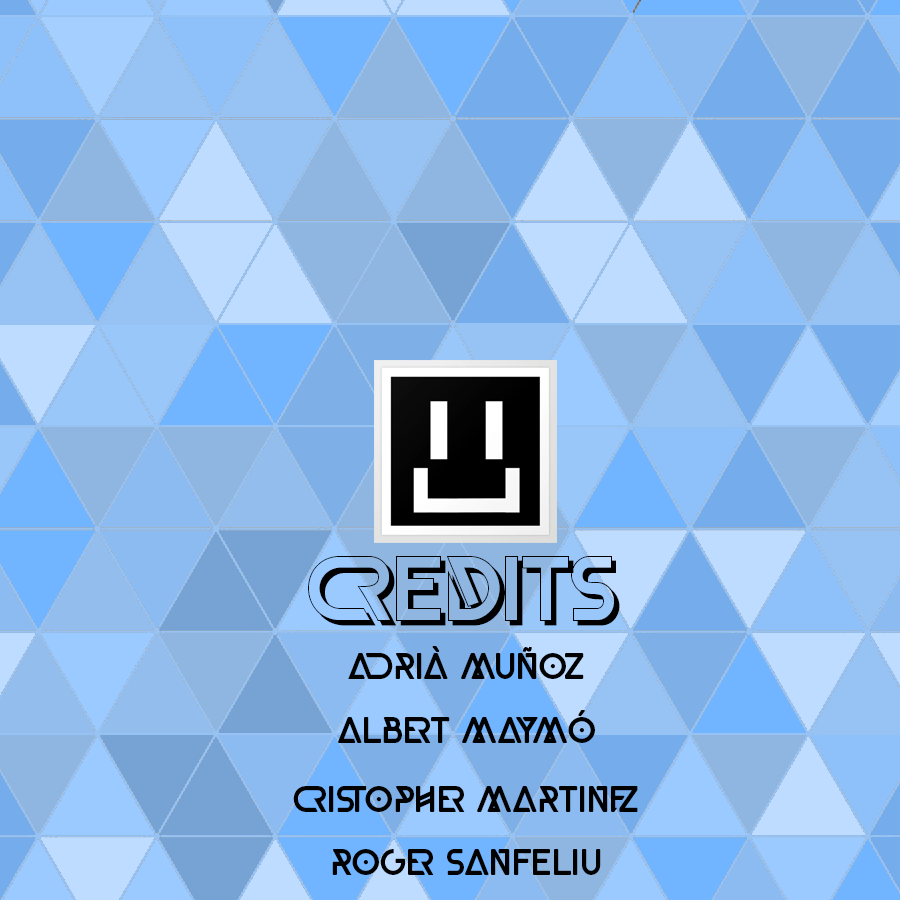
<style>
.page{position:relative;width:900px;height:900px}
.page>*{position:absolute;margin:0}
.t1{font:90px "RobloxBlackShadow";color:#000000}
.t2{font:36px "RobloxBlackRound";color:#010101}
</style>
<div class="page">
<p class="t1" style="left:308px;top:556px;width:312px;height:70px">credits</p>
<p class="t2" style="left:348px;top:646px;width:236px;height:33px">ADRIÀ MUÑOZ</p>
<p class="t2" style="left:338px;top:710px;width:257px;height:33px">ALBERT MAYMÓ</p>
<p class="t2" style="left:293px;top:786px;width:345px;height:26px">cristopher Martinez</p>
<p class="t2" style="left:332px;top:849px;width:269px;height:26px">Roger Sanfeliu</p>
</div>
